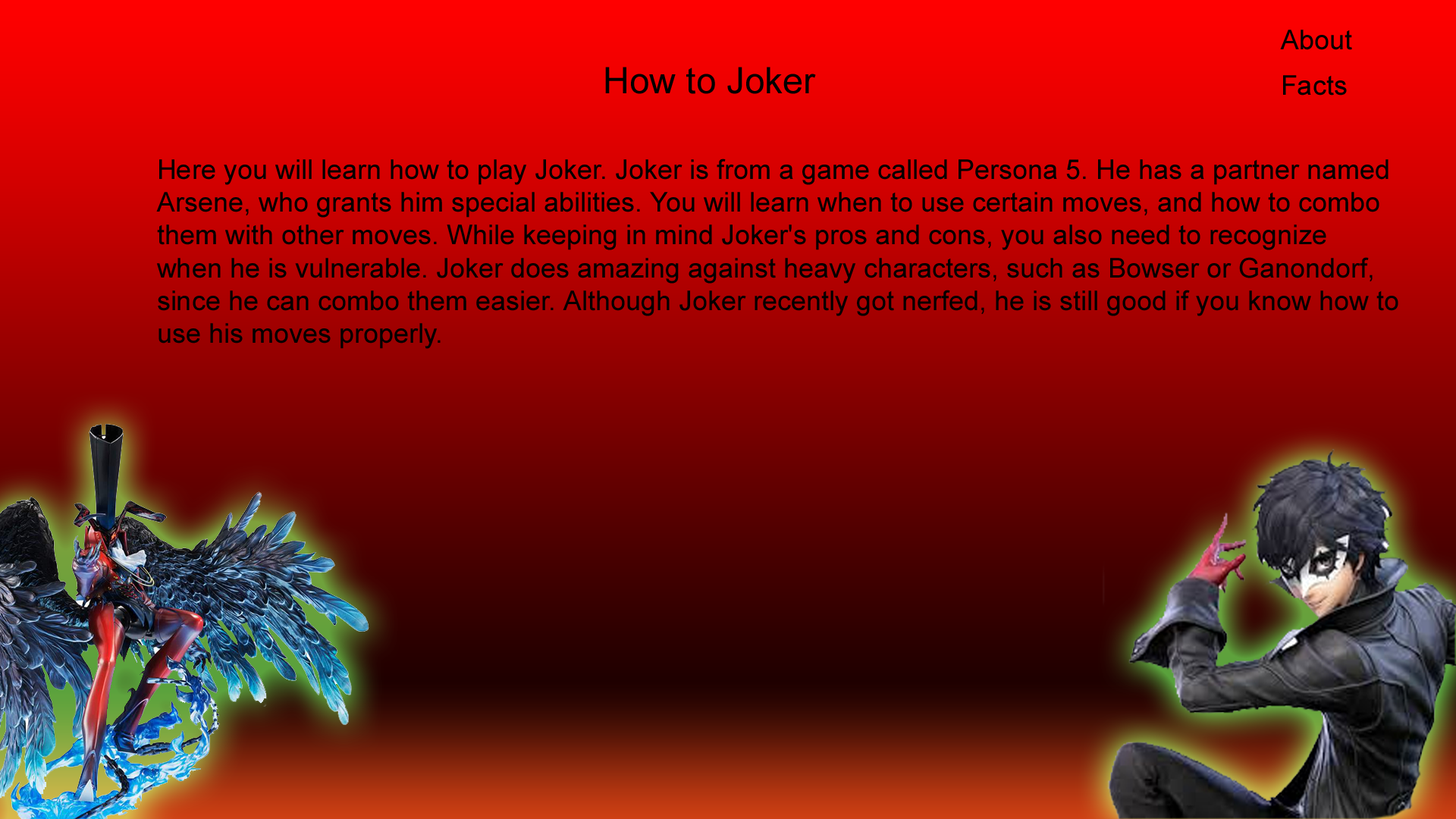
<style>
.page{position:relative;width:1456px;height:819px}
.page>*{position:absolute;margin:0}
.t1{font:27.3px "ArialMT";color:#000000}
.t2{font:36.4px "ArialMT";color:#000000}
</style>
<div class="page">
<p class="t1" style="left:1280px;top:30px;width:72px;height:20px">About</p>
<p class="t2" style="left:605px;top:67px;width:211px;height:27px">How to Joker</p>
<p class="t1" style="left:1283px;top:75px;width:64px;height:21px">Facts</p>
<p class="t1" style="left:156px;top:158px;width:1242px;height:191px">Here you will learn how to play Joker. Joker is from a game called Persona 5. He has a partner named<br>Arsene, who grants him special abilities. You will learn when to use certain moves, and how to combo<br>them with other moves. While keeping in mind Joker's pros and cons, you also need to recognize<br>when he is vulnerable. Joker does amazing against heavy characters, such as Bowser or Ganondorf,<br>since he can combo them easier. Although Joker recently got nerfed, he is still good if you know how to <br>use his moves properly.</p>
</div>
